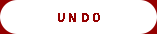
<style>
.page{position:relative;width:157px;height:34px;background:#ffffff}
.page>*{position:absolute;margin:0}
.t1{font:14.1px "WorkSansRoman-Bold";letter-spacing:0.3em;color:#940000;scale:0.82 1}
</style>
<div class="page">
<p class="t1" style="left:58px;top:13px;width:42px;height:9px">UNDO</p>
</div>
